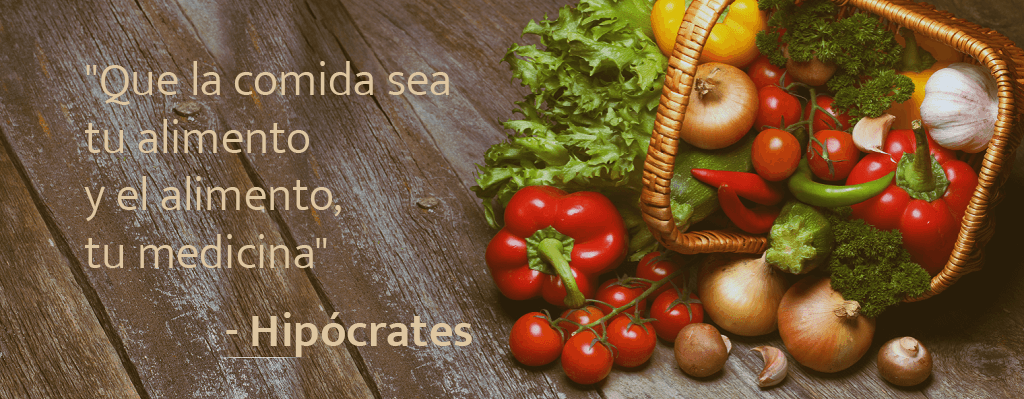
<style>
.page{position:relative;width:1024px;height:399px}
.page>*{position:absolute;margin:0}
.t1{font:48px "MuktaMahee-Light";color:#dec6a0}
.t2{font:48px "MuktaMahee-SemiBold";color:#dec6a0}
</style>
<div class="page">
<p class="t1" style="left:84px;top:61px;width:365px;height:207px">"Que la comida sea <br>tu alimento <br>y el alimento, <br>tu medicina"</p>
<p class="t2" style="left:226px;top:312px;width:246px;height:45px">- Hipócrates</p>
</div>
